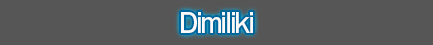
<style>
.page{position:relative;width:433px;height:45px;background:#565656}
.page>*{position:absolute;margin:0}
.t1{font:26px "GothicMB101Pro-Medium";letter-spacing:-0.08em;color:#fdfbf9;scale:0.9 1}
</style>
<div class="page">
<p class="t1" style="left:181px;top:12px;width:72px;height:21px">Dimiliki</p>
</div>
